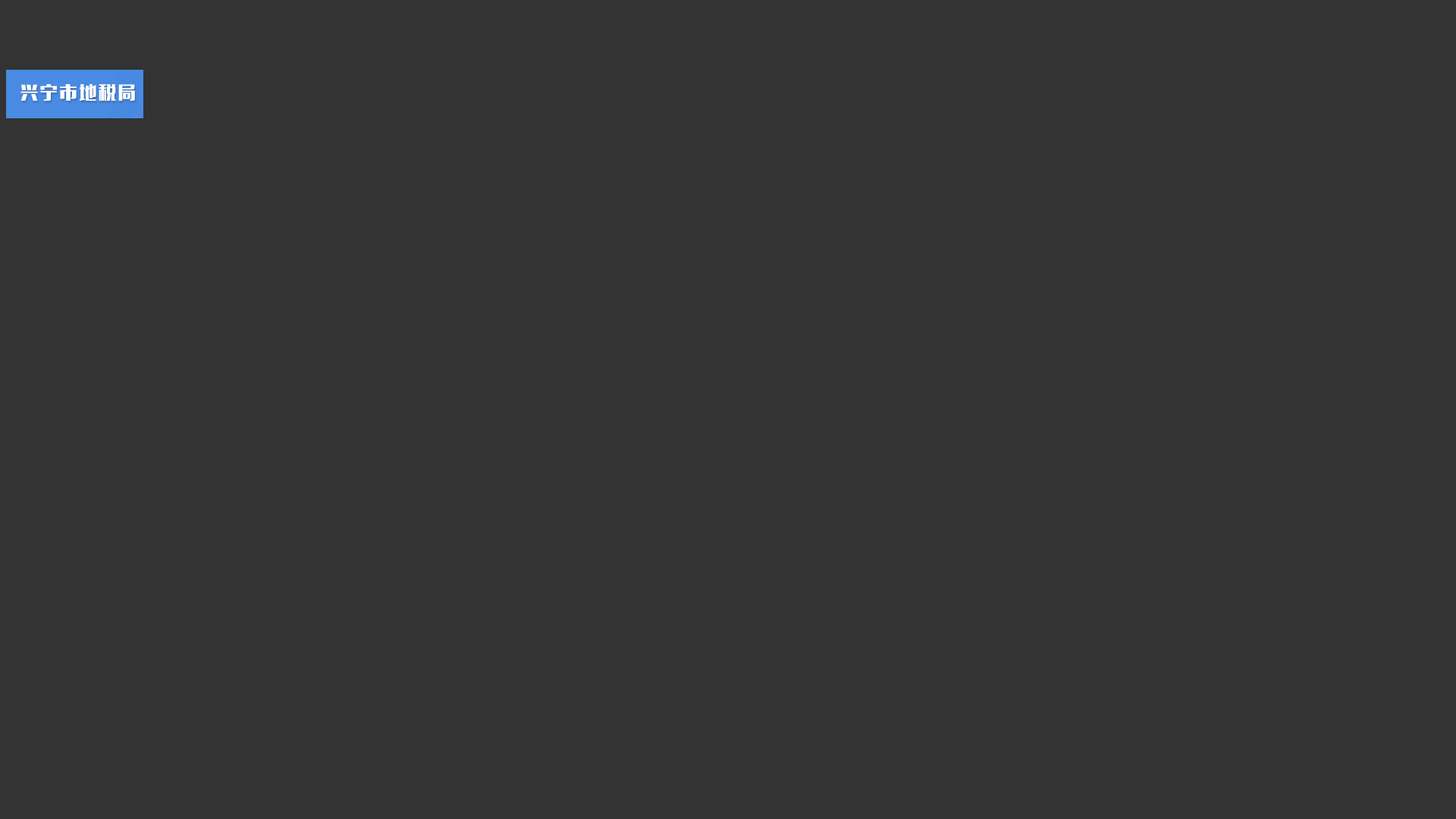
<style>
.page{position:relative;width:1456px;height:819px;background:#333333}
.page>*{position:absolute;margin:0}
.t1{font:17.4px "MFLiHei_Noncommercial-Regular";letter-spacing:0.12em;color:#ffffff}
</style>
<div class="page">
<p class="t1" style="left:20px;top:84px;width:115px;height:17px">兴宁市地税局</p>
</div>
